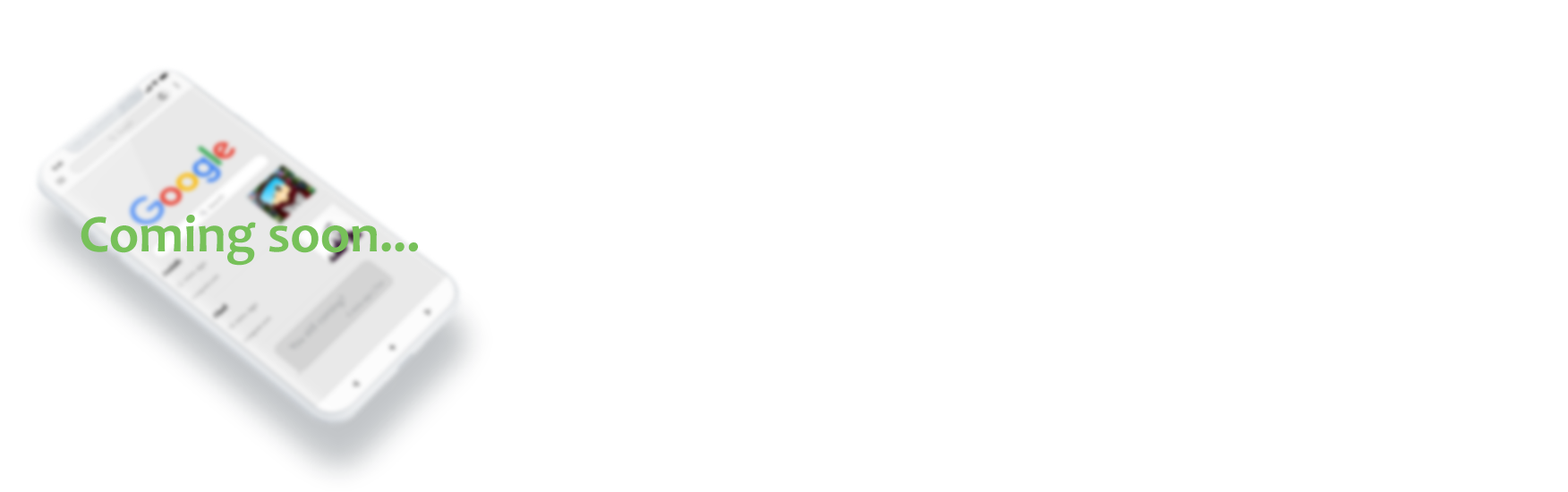
<style>
.page{position:relative;width:1568px;height:492px;background:#ffffff}
.page>*{position:absolute;margin:0}
.t1{font:53.7px "Candara-Bold";color:#77c159}
</style>
<div class="page">
<p class="t1" style="left:81px;top:215px;width:337px;height:51px">Coming soon...</p>
</div>
